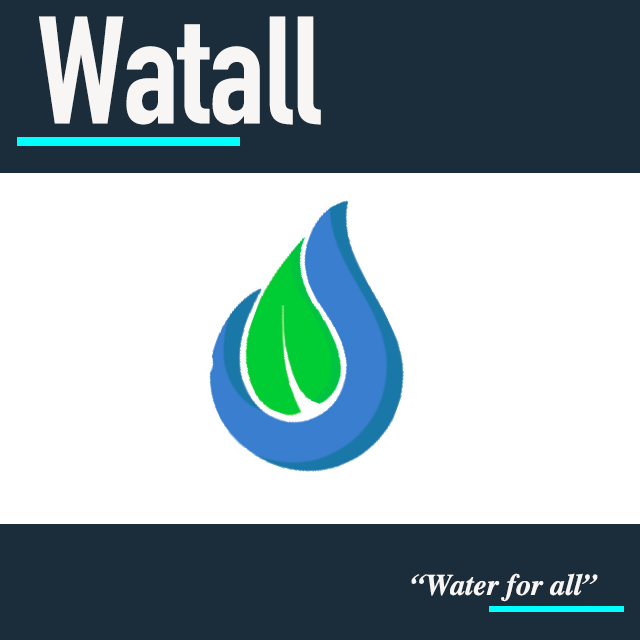
<style>
.page{position:relative;width:640px;height:640px;background:#ffffff}
.page>*{position:absolute;margin:0}
.t1{font:150px "DINCondensed-Bold";color:#f8f6f5}
.t2{font:30px "Times-BoldItalic";color:#f8f6f4}
</style>
<div class="page">
<p class="t1" style="left:39px;top:16px;width:282px;height:109px">Watall</p>
<p class="t2" style="left:411px;top:573px;width:187px;height:29px">“Water for all”</p>
</div>
